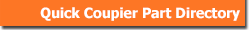
<style>
.page{position:relative;width:250px;height:30px;background:#fd7625}
.page>*{position:absolute;margin:0}
.t1{font:14px "Tahoma-Bold";color:#ffffff}
</style>
<div class="page">
<p class="t1" style="left:40px;top:7px;width:200px;height:14px">Quick Coupier Part Directory</p>
</div>
